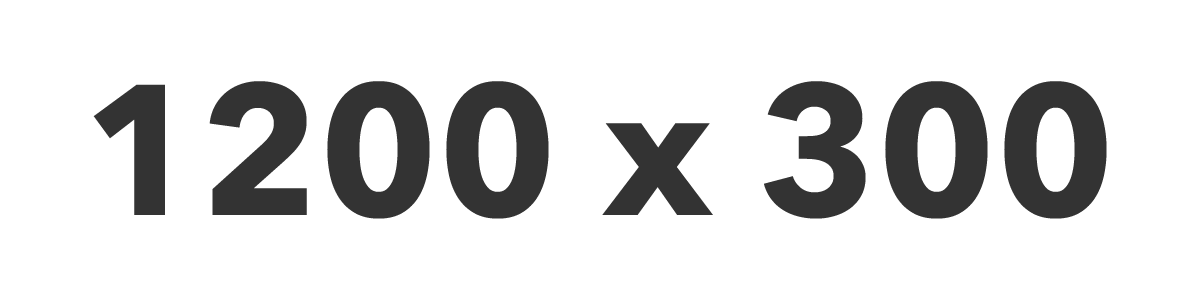
<style>
.page{position:relative;width:1200px;height:300px;background:#ffffff}
.page>*{position:absolute;margin:0}
.t1{font:184px "AvenirNext-Bold";color:#333333}
</style>
<div class="page">
<p class="t1" style="left:93px;top:81px;width:1014px;height:138px">1200 x 300</p>
</div>
